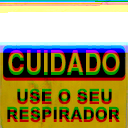
<style>
.page{position:relative;width:128px;height:128px;background:#ffffff}
.page>*{position:absolute;margin:0}
.t1{font:29.4px "Helvetica-Narrow-Bold"}
.t2{font:16.9px "MHeiPRC-Xbold"}
</style>
<div class="page">
<p class="t1" style="left:8px;top:48px;width:112px;height:22px">CUIDADO</p>
<p class="t2" style="left:17px;top:86px;width:95px;height:14px">USE O SEU</p>
</div>
